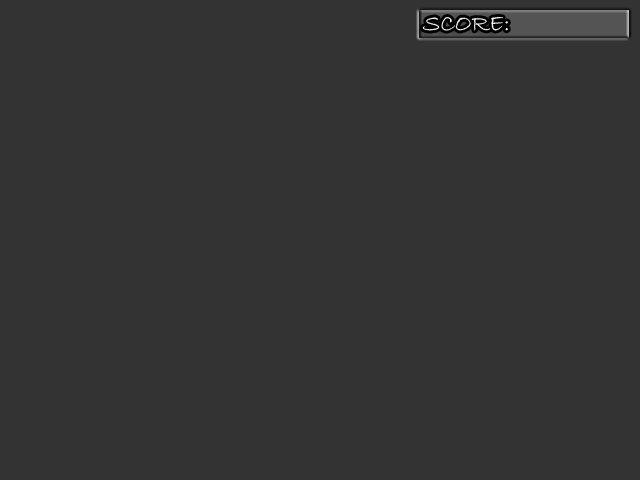
<style>
.page{position:relative;width:640px;height:480px;background:#333333}
.page>*{position:absolute;margin:0}
.t1{font:24px "BradleyHandITC";color:#ffffff}
</style>
<div class="page">
<p class="t1" style="left:422px;top:17px;width:86px;height:14px">SCORE:</p>
</div>
